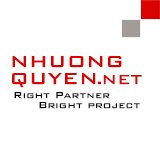
<style>
.page{position:relative;width:160px;height:160px;background:#ffffff}
.page>*{position:absolute;margin:0}
.t1{font:22px "BankGothicBT-Medium";color:#da0200}
.t2{font:22px "BankGothic-Medium";color:#da0301}
.t3{font:18px "BankGothic-Medium";color:#da0301}
.t4{font:12px "BankGothic-Medium";color:#000000}
</style>
<div class="page">
<p class="t1" style="left:12px;top:56px;width:110px;height:12px">NHUONG</p>
<p class="t2" style="left:12px;top:73px;width:84px;height:15px">QUYEN</p>
<p class="t3" style="left:103px;top:75px;width:39px;height:10px">NET</p>
<p class="t3" style="left:98px;top:81px;width:3px;height:4px">.</p>
<p class="t4" style="left:14px;top:92px;width:96px;height:7px">Right Partner</p>
<p class="t4" style="left:39px;top:102px;width:101px;height:7px">Bright project</p>
</div>
